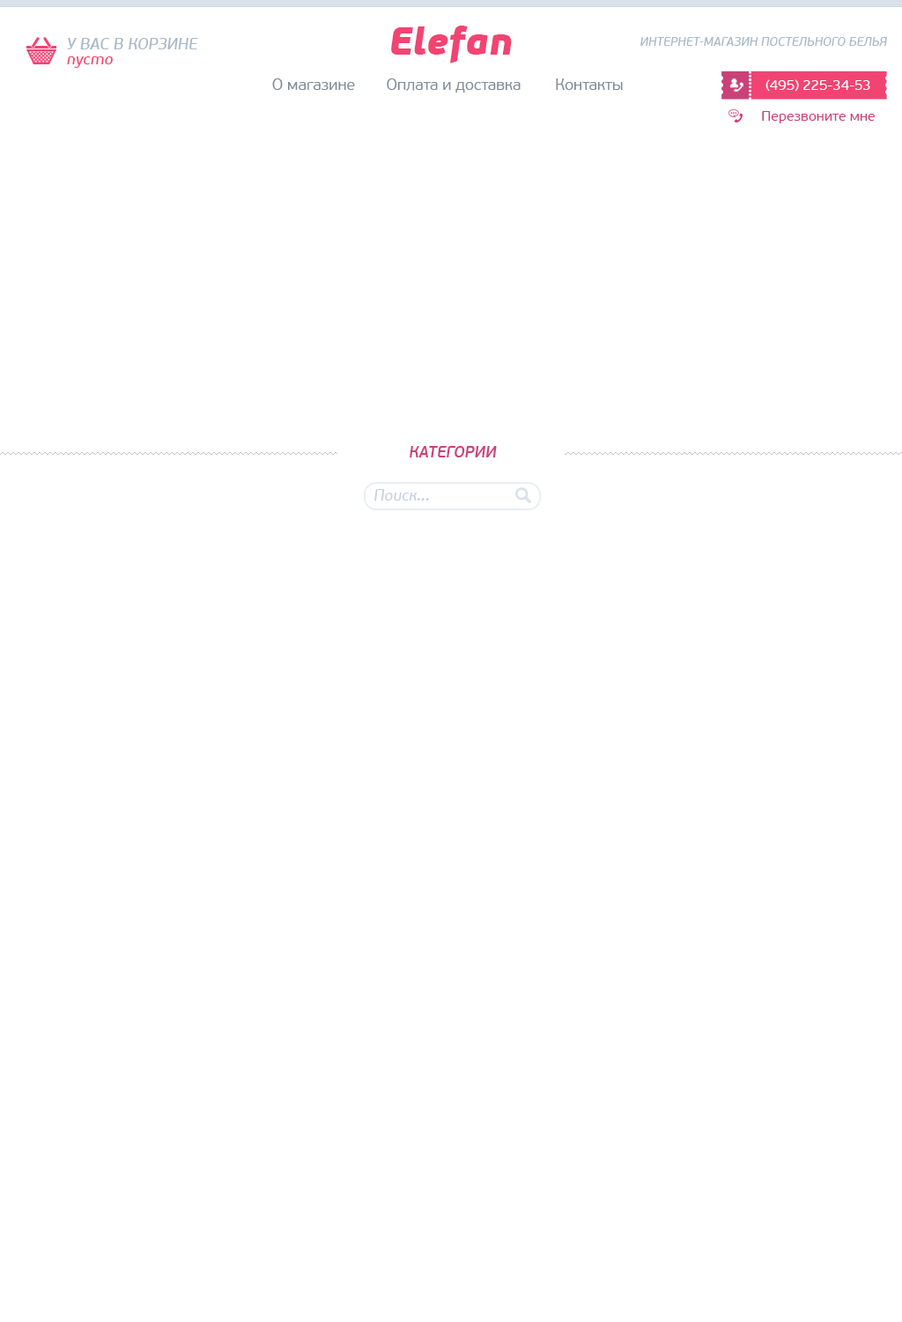
<style>
.page{position:relative;width:902px;height:1322px;background:#ffffff}
.page>*{position:absolute;margin:0}
.t1{font:38.4px "PFBeauSansPro-BlackItalic";color:#f14472}
.t2{font:15.7px "PFBeauSansPro-BbookItalic";color:#a8b8c7;text-transform:uppercase}
.t3{font:12.2px "PFBeauSansPro-BbookItalic";color:#a8b8c7;text-transform:uppercase}
.t4{font:15.7px "PFBeauSansPro-BbookItalic";color:#f14472}
.t5{font:15.7px "PFBeauSansPro-Light";color:#7f8c98}
.t6{font:14px "PFBeauSansPro-Regular";color:#ffffff}
.t7{font:14px "PFBeauSansPro-Regular";color:#ca4179}
.t8{font:15.7px "PFBeauSansPro-SemiBoldItalic";color:#ca4179;text-transform:uppercase}
.t9{font:15.7px "PFBeauSansPro-BbookItalic";color:#c7d2dd}
</style>
<div class="page">
<p class="t1" style="left:391px;top:26px;width:121px;height:37px">Elefan</p>
<p class="t2" style="left:67px;top:38px;width:131px;height:11px">У ВАС В КОРЗИНЕ</p>
<p class="t3" style="left:641px;top:37px;width:246px;height:9px">Интернет-магазин постельного белья</p>
<p class="t4" style="left:67px;top:56px;width:46px;height:12px">пусто</p>
<p class="t5" style="left:272px;top:78px;width:83px;height:12px">О магазине</p>
<p class="t5" style="left:387px;top:78px;width:134px;height:15px">Оплата и доставка</p>
<p class="t5" style="left:556px;top:78px;width:67px;height:12px">Контакты</p>
<p class="t6" style="left:766px;top:79px;width:105px;height:13px">(495) 225-34-53</p>
<p class="t7" style="left:762px;top:111px;width:113px;height:12px">Перезвоните мне</p>
<p class="t8" style="left:410px;top:446px;width:87px;height:11px">Категории</p>
<p class="t9" style="left:374px;top:489px;width:55px;height:11px">Поиск...</p>
</div>
